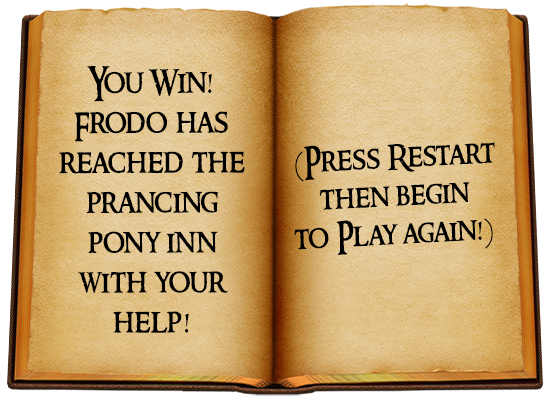
<style>
.page{position:relative;width:550px;height:400px}
.page>*{position:absolute;margin:0}
.t1{font:33.3px "RingbearerMedium";color:#000000;scale:0.92 1}
.t2{font:31.9px "RingbearerMedium";color:#000000;scale:0.91 1}
</style>
<div class="page">
<p class="t1" style="left:59px;top:66px;width:186px;height:267px;text-align:center">You Win!<br>Frodo has<br>reached the<br>prancing<br>pony inn<br>with your<br>help!</p>
<p class="t2" style="left:294px;top:142px;width:201px;height:113px;text-align:center;rotate:-3deg">(Press Restart<br>then begin<br>to Play again!)</p>
</div>
